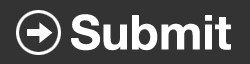
<style>
.page{position:relative;width:250px;height:64px;background:#333333}
.page>*{position:absolute;margin:0}
.t1{font:48px "HelveticaNeue-Bold";color:#ffffff}
</style>
<div class="page">
<p class="t1" style="left:71px;top:14px;width:160px;height:37px">Submit</p>
</div>
